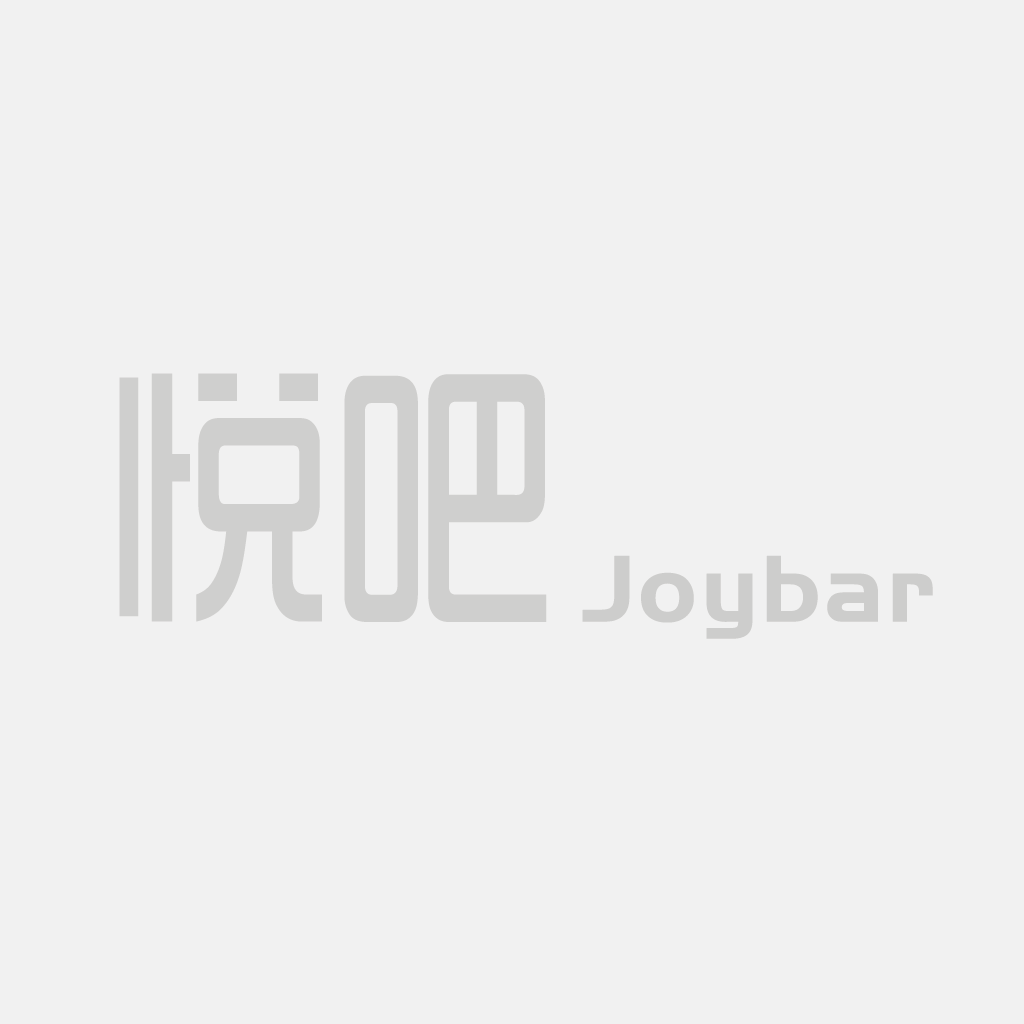
<style>
.page{position:relative;width:1024px;height:1024px;background:#f1f1f1}
.page>*{position:absolute;margin:0}
.t1{font:299px "ShiShangZhongHei";color:#cfcfce;scale:0.75 1}
.t2{font:98.3px "HandelGotD-Bold";color:#cdcdcc;font-weight:bold}
</style>
<div class="page">
<p class="t1" style="left:119px;top:373px;width:428px;height:249px">悦吧</p>
<p class="t2" style="left:582px;top:555px;width:351px;height:84px">Joybar</p>
</div>
